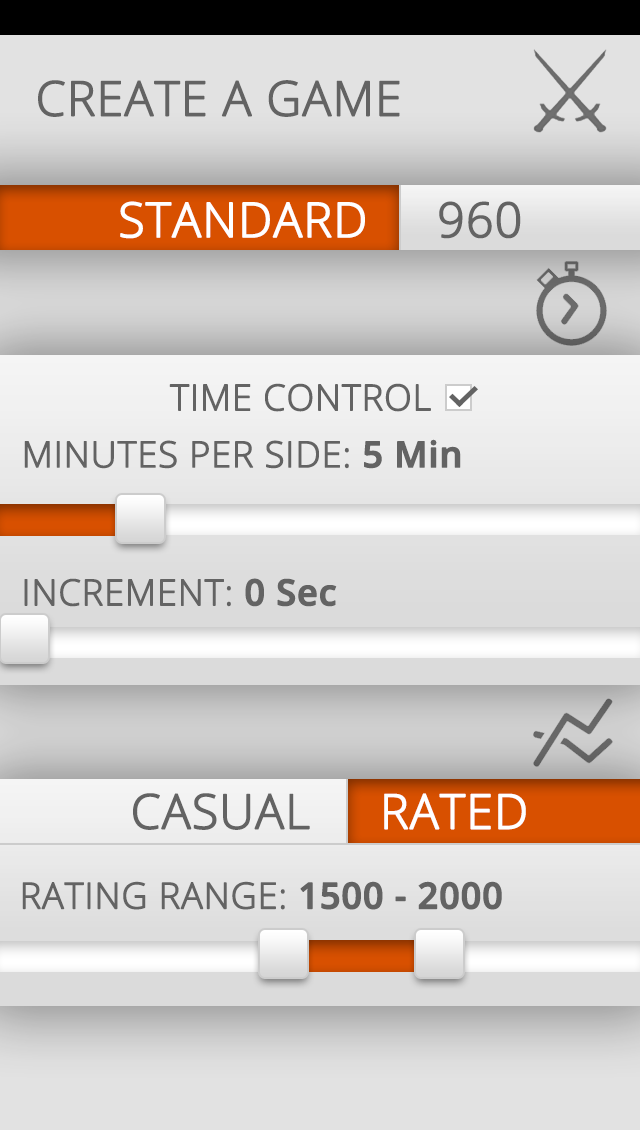
<style>
.page{position:relative;width:640px;height:1130px}
.page>*{position:absolute;margin:0}
.t1{font:48px "OpenSans-Light";color:#636363;font-weight:bold}
.t2{font:48px "OpenSans-Light";color:#ffffff;font-weight:bold}
.t3{font:36px "OpenSans-Light";color:#636363;font-weight:bold}
.t4{font:36px "OpenSans-Semibold";color:#636363;font-weight:bold}
</style>
<div class="page">
<p class="t1" style="left:38px;top:80px;width:362px;height:37px">CREATE A GAME</p>
<p class="t2" style="left:120px;top:201px;width:401px;height:38px">STANDARD<span class="t1">     960</span></p>
<p class="t3" style="left:169px;top:383px;width:262px;height:29px">TIME CONTROL</p>
<p class="t3" style="left:24px;top:439px;width:437px;height:30px">MINUTES PER SIDE: <span class="t4">5 Min</span></p>
<p class="t3" style="left:24px;top:578px;width:313px;height:29px">INCREMENT: <span class="t4">0 Sec</span></p>
<p class="t1" style="left:133px;top:793px;width:393px;height:37px">CASUAL     <span class="t2">RATED</span></p>
<p class="t3" style="left:22px;top:881px;width:480px;height:29px">RATING RANGE: <span class="t4">1500 - 2000</span></p>
</div>
